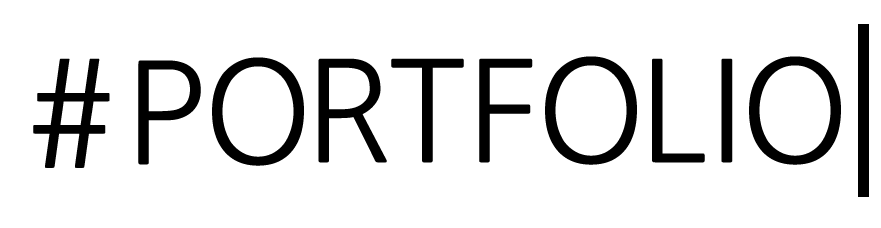
<style>
.page{position:relative;width:881px;height:228px;background:#ffffff}
.page>*{position:absolute;margin:0}
.t1{font:147px "NanumGothic";letter-spacing:-0.02em;color:#000000}
.t2{font:140px "NanumGothic";letter-spacing:-0.02em;color:#000000}
</style>
<div class="page">
<p class="t1" style="left:33px;top:58px;width:77px;height:110px">#</p>
<p class="t2" style="left:138px;top:60px;width:63px;height:105px">P</p>
<p class="t2" style="left:212px;top:57px;width:92px;height:109px">O</p>
<p class="t2" style="left:318px;top:58px;width:69px;height:105px">R</p>
<p class="t2" style="left:391px;top:58px;width:73px;height:105px">T</p>
<p class="t2" style="left:479px;top:58px;width:54px;height:105px">F</p>
<p class="t2" style="left:545px;top:56px;width:92px;height:109px">O</p>
<p class="t2" style="left:652px;top:58px;width:53px;height:105px">L</p>
<p class="t2" style="left:721px;top:58px;width:12px;height:105px">I</p>
<p class="t2" style="left:749px;top:56px;width:92px;height:109px">O</p>
</div>
